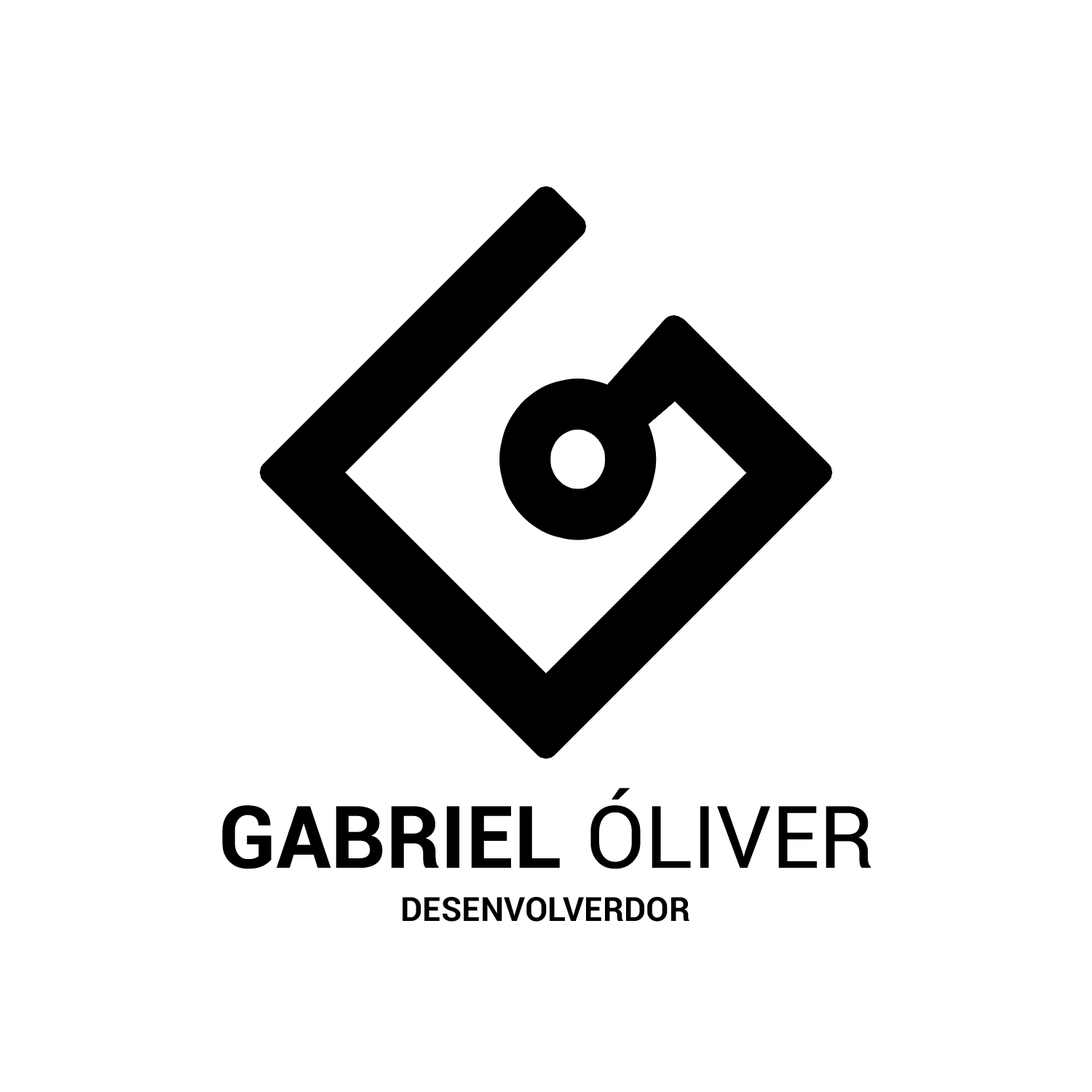
<style>
.page{position:relative;width:1092px;height:1092px;background:#ffffff}
.page>*{position:absolute;margin:0}
.t1{font:86.4px "Roboto-Bold";color:#000000;text-transform:uppercase}
.t2{font:86.4px "Roboto-Regular";color:#000000;text-transform:uppercase}
.t3{font:33.3px "Roboto-Bold";color:#000000;text-transform:uppercase}
</style>
<div class="page">
<p class="t1" style="left:222px;top:788px;width:649px;height:81px">GABRIEL <span class="t2">ÓLIVER</span></p>
<p class="t3" style="left:403px;top:897px;width:286px;height:25px">DESENVOLVERDOR</p>
</div>
